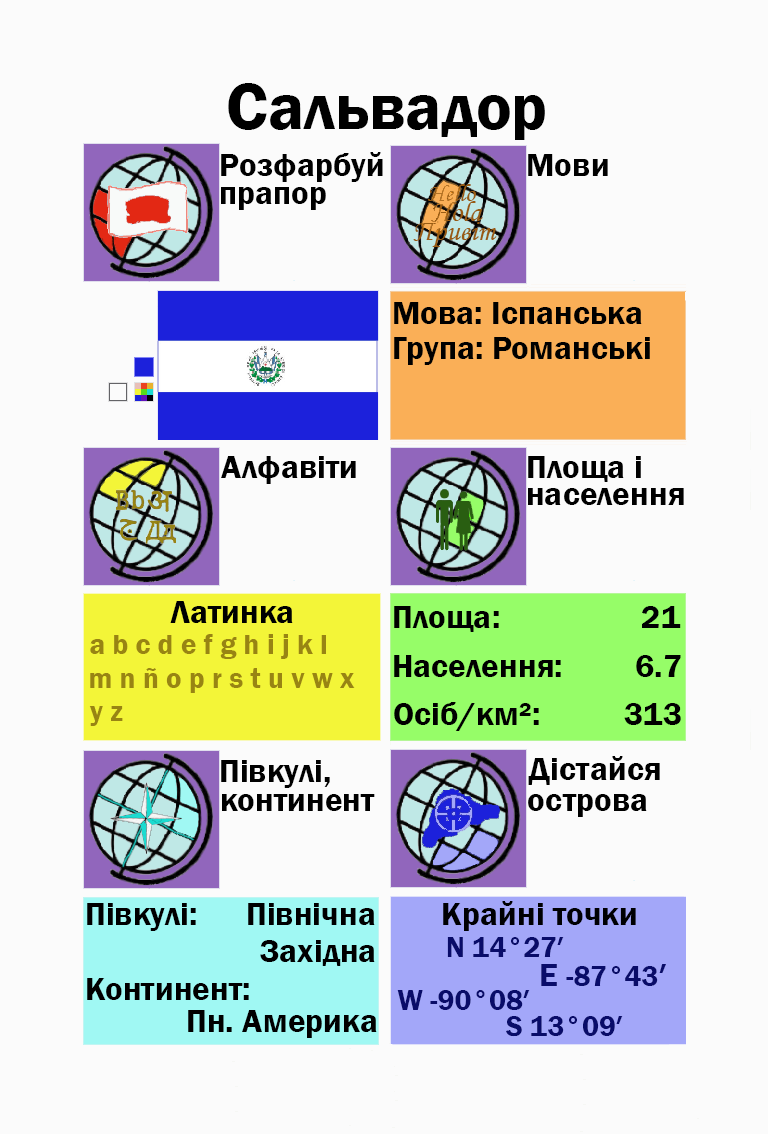
<style>
.page{position:relative;width:768px;height:1134px;background:#fbfbfb}
.page>*{position:absolute;margin:0}
.t1{font:66.7px "FranklinGothic-Demi";color:#000000}
.t2{font:33.3px "FranklinGothic-Demi";color:#000000}
.t3{font:33.3px "FranklinGothic-Demi";color:#000003}
.t4{font:29.2px "FranklinGothic-Demi";color:#988413}
.t5{font:29.2px "FranklinGothic-Demi";color:#090c69}
.t6{font:33.3px "FranklinGothic-Demi";color:#090c69}
</style>
<div class="page">
<p class="t1" style="left:228px;top:83px;width:317px;height:57px">Сальвадор</p>
<p class="t2" style="left:221px;top:152px;width:162px;height:30px">Розфарбуй</p>
<p class="t2" style="left:528px;top:154px;width:80px;height:22px">Мови</p>
<p class="t2" style="left:221px;top:187px;width:105px;height:23px">прапор</p>
<p class="t2" style="left:394px;top:302px;width:248px;height:22px">Мова: Іспанська</p>
<p class="t2" style="left:394px;top:337px;width:256px;height:28px">Група: Романські</p>
<p class="t2" style="left:221px;top:456px;width:135px;height:28px">Алфавіти</p>
<p class="t2" style="left:528px;top:456px;width:113px;height:26px">Площа і</p>
<p class="t2" style="left:528px;top:488px;width:156px;height:17px">населення</p>
<p class="t2" style="left:170px;top:601px;width:123px;height:22px">Латинка</p>
<p class="t2" style="left:394px;top:606px;width:105px;height:26px">Площа:</p>
<p class="t3" style="left:642px;top:606px;width:39px;height:22px">21</p>
<p class="t4" style="left:90px;top:634px;width:236px;height:25px">a b c d e f g h i j k l</p>
<p class="t2" style="left:394px;top:655px;width:167px;height:22px">Населення:</p>
<p class="t2" style="left:636px;top:655px;width:45px;height:22px">6.7</p>
<p class="t4" style="left:90px;top:668px;width:265px;height:25px">m n ñ o p r s t u v w x</p>
<p class="t2" style="left:394px;top:702px;width:145px;height:29px">Осіб/км²:</p>
<p class="t4" style="left:89px;top:706px;width:34px;height:20px">y z</p>
<p class="t2" style="left:624px;top:703px;width:57px;height:22px">313</p>
<p class="t2" style="left:221px;top:760px;width:109px;height:28px">Півкулі,</p>
<p class="t2" style="left:528px;top:756px;width:132px;height:29px">Дістайся</p>
<p class="t2" style="left:222px;top:794px;width:153px;height:17px">континент</p>
<p class="t2" style="left:528px;top:794px;width:119px;height:23px">острова</p>
<p class="t2" style="left:87px;top:903px;width:109px;height:28px">Півкулі:</p>
<p class="t2" style="left:248px;top:903px;width:127px;height:22px">Північна</p>
<p class="t3" style="left:443px;top:901px;width:193px;height:30px">Крайні точки</p>
<p class="t2" style="left:260px;top:940px;width:115px;height:26px">Західна</p>
<p class="t5" style="left:447px;top:937px;width:117px;height:20px">N 14°27′</p>
<p class="t5" style="left:541px;top:964px;width:125px;height:22px"><span class="t6">E </span>-87°43<span class="t6">′</span></p>
<p class="t2" style="left:87px;top:978px;width:162px;height:22px">Континент:</p>
<p class="t5" style="left:397px;top:990px;width:133px;height:20px">W -90°08′</p>
<p class="t2" style="left:188px;top:1010px;width:189px;height:28px">Пн. Америка</p>
<p class="t5" style="left:506px;top:1016px;width:117px;height:21px">S 13°09′</p>
</div>
